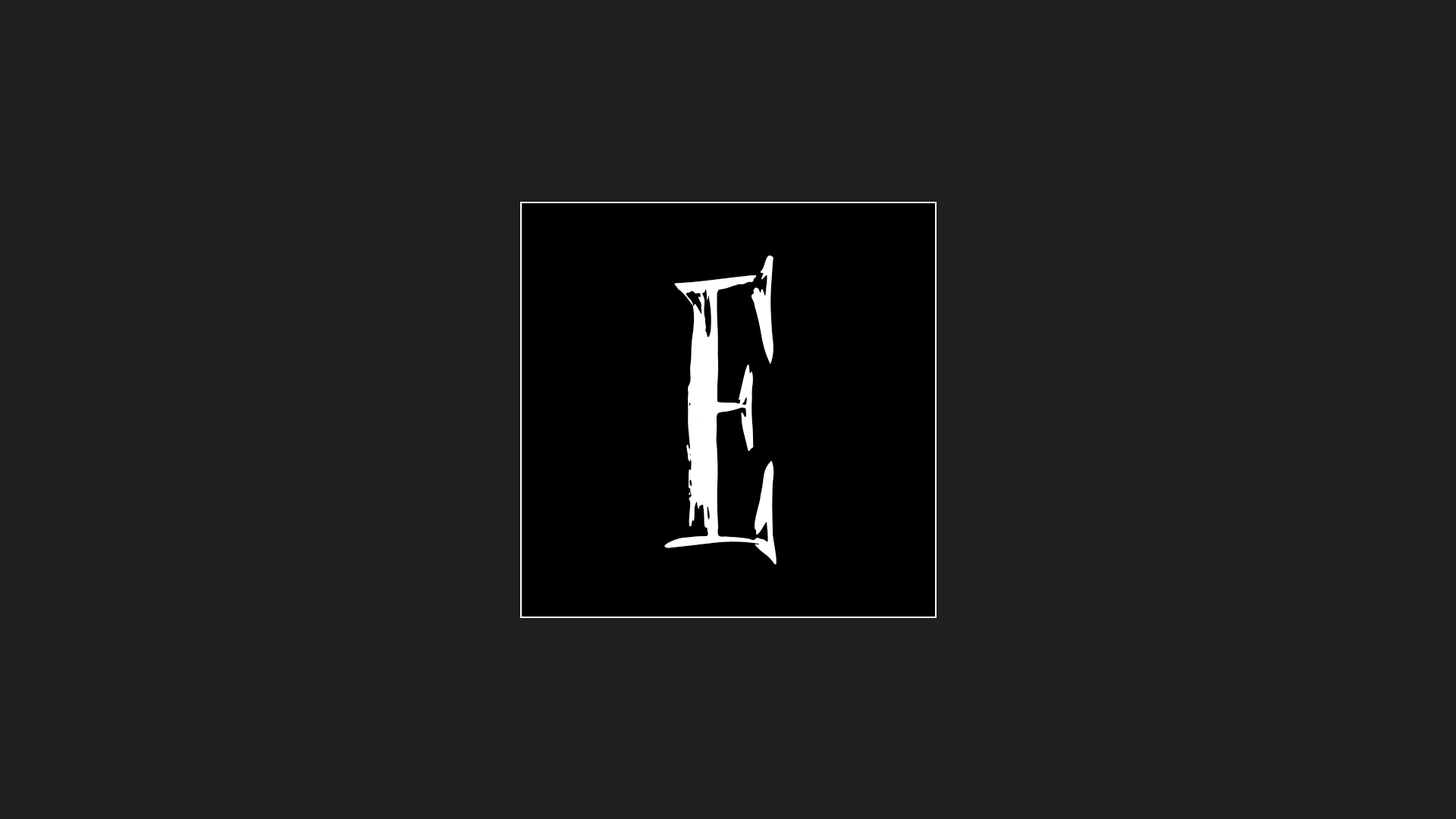
<style>
.page{position:relative;width:1456px;height:819px;background:#1f1f1f}
.page>*{position:absolute;margin:0}
.t1{font:392.6px "UnfinishedScreamAlternative";color:#ffffff}
</style>
<div class="page">
<p class="t1" style="left:664px;top:255px;width:113px;height:310px">E</p>
</div>
